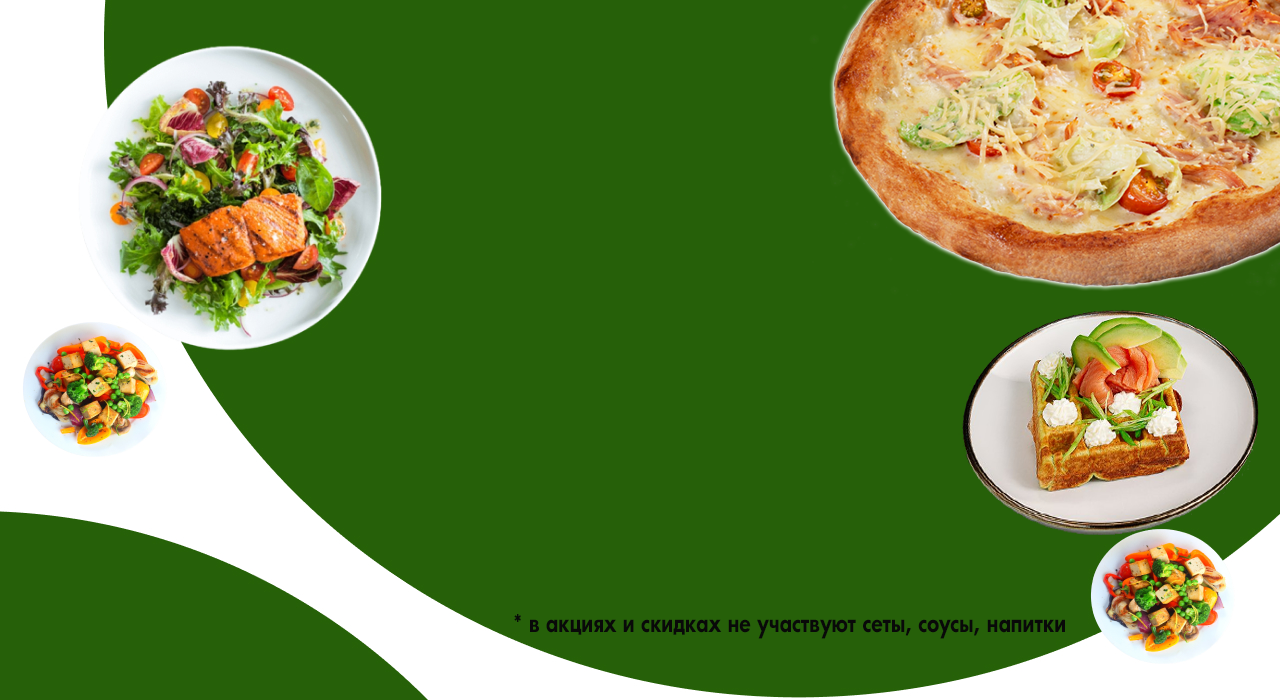
<style>
.page{position:relative;width:1280px;height:700px;background:#266009}
.page>*{position:absolute;margin:0}
.t1{font:24px "AFuturicaBsBold";color:#090909;scale:0.8 1}
</style>
<div class="page">
<p class="t1" style="left:514px;top:614px;width:551px;height:25px">* в акциях и скидках не участвуют сеты, соусы, напитки</p>
</div>
